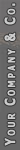
<style>
.page{position:relative;width:20px;height:150px;background:#666666}
.page>*{position:absolute;margin:0}
.t1{font:14.3px "Tahoma-Bold";letter-spacing:0.2em;color:#cccccc;font-variant:small-caps;font-weight:bold;scale:0.77 1}
</style>
<div class="page">
<p class="t1" style="left:4px;top:3px;width:12px;height:143px;rotate:-90deg">Your Company &amp; Co.</p>
</div>
